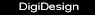
<style>
.page{position:relative;width:95px;height:15px;background:#000000}
.page>*{position:absolute;margin:0}
.t1{font:9.6px "Geneva";color:#ffffff;scale:1.25 1}
</style>
<div class="page">
<p class="t1" style="left:19px;top:2px;width:60px;height:11px">DigiDesign</p>
</div>
